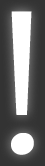
<style>
.page{position:relative;width:45px;height:166px;background:#ffffff}
.page>*{position:absolute;margin:0}
.t1{font:160px "Merriweather-Regular";color:#ffffff}
</style>
<div class="page">
<p class="t1" style="left:11px;top:11px;width:23px;height:144px">!</p>
</div>
